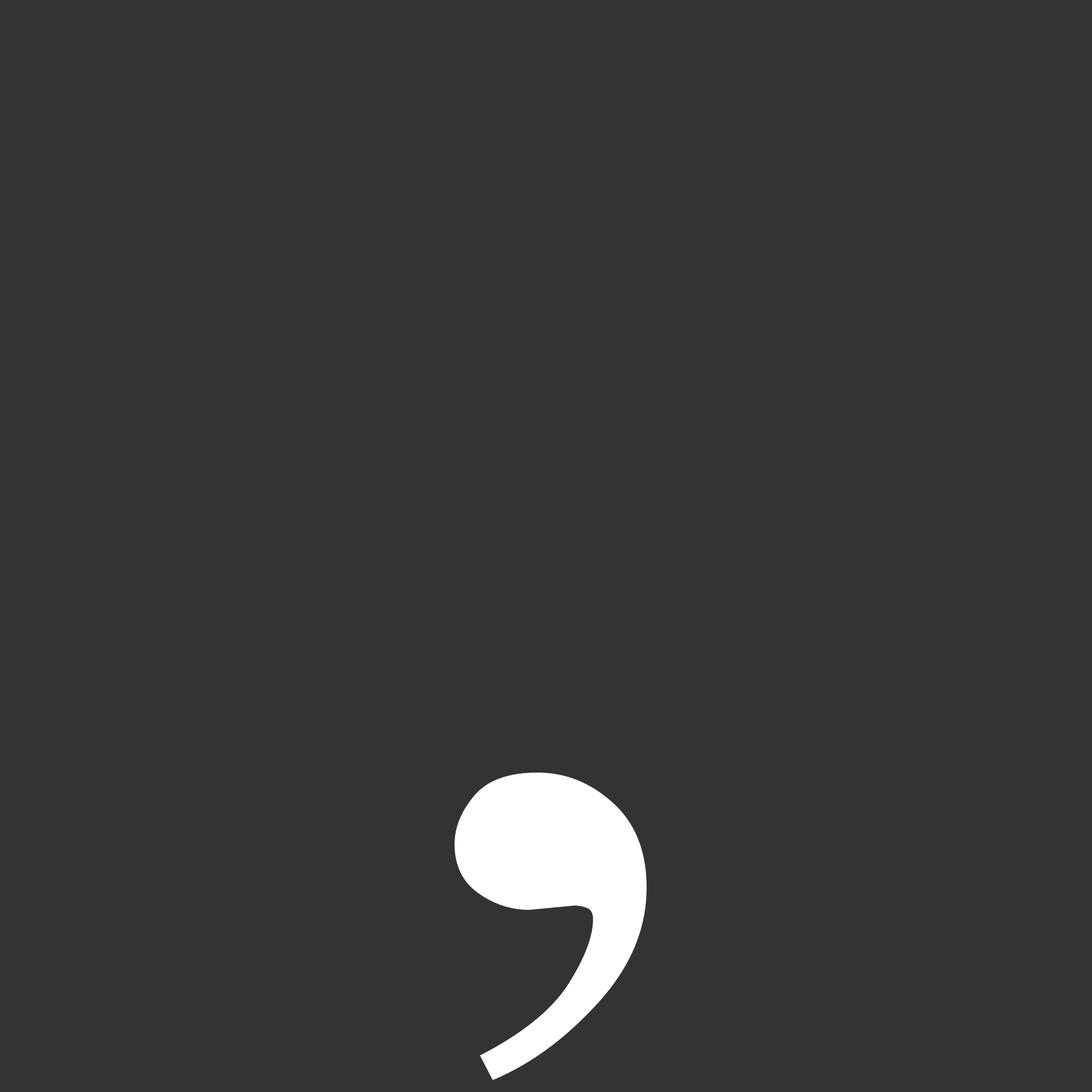
<style>
.page{position:relative;width:1092px;height:1092px;background:#333333}
.page>*{position:absolute;margin:0}
.t1{font:1258.5px "Times-Roman";color:#ffffff;scale:1.09 1}
</style>
<div class="page">
<p class="t1" style="left:455px;top:773px;width:192px;height:307px">,</p>
</div>
